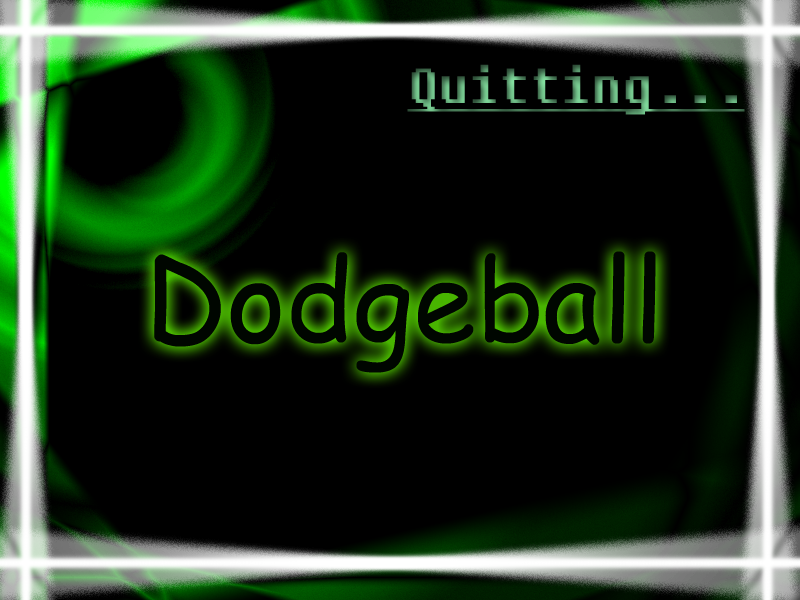
<style>
.page{position:relative;width:800px;height:600px;background:#000000}
.page>*{position:absolute;margin:0}
.t1{font:49px "Fixedsys";text-decoration:underline}
.t2{font:114px "ComicSansMS";color:#000600}
</style>
<div class="page">
<p class="t1" style="left:407px;top:64px;width:338px;height:51px">Quitting...</p>
<p class="t2" style="left:154px;top:251px;width:502px;height:122px">Dodgeball</p>
</div>
